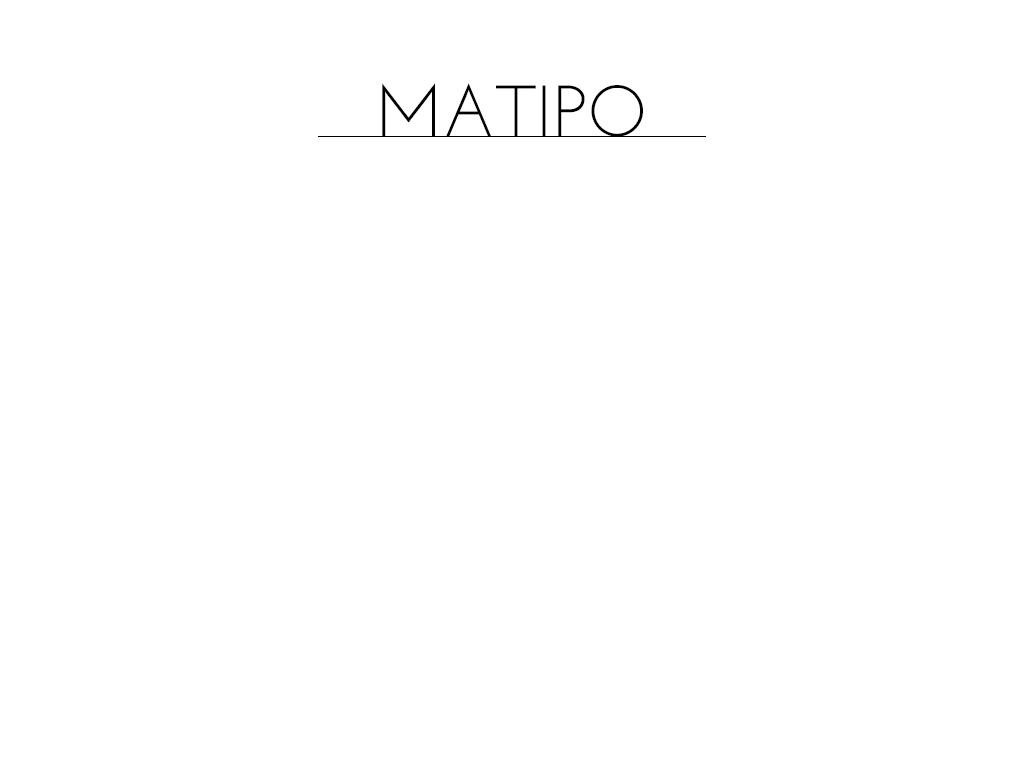
<style>
.page{position:relative;width:1024px;height:768px;background:#ffffff}
.page>*{position:absolute;margin:0}
.t1{font:72px "JosefinSans";color:#000000}
</style>
<div class="page">
<p class="t1" style="left:382px;top:83px;width:261px;height:54px">MATIPO</p>
</div>
